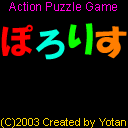
<style>
.page{position:relative;width:128px;height:128px;background:#000000}
.page>*{position:absolute;margin:0}
.t1{font:12px "ArialMT";color:#ff00de}
.t2{font:36px "HGSoeiKakugothicUB";color:#ff0000}
.t3{font:36px "HGSoeiKakugothicUB";color:#00ffde}
.t4{font:36px "HGSoeiKakupoptai";color:#0cff00}
.t5{font:36px "HGSoeiKakupoptai";color:#ff7e00}
.t6{font:11px "ArialMT";color:#ffd800}
</style>
<div class="page">
<p class="t1" style="left:9px;top:2px;width:108px;height:9px">Action Puzzle Game</p>
<p class="t2" style="left:1px;top:24px;width:32px;height:32px">ぽ</p>
<p class="t3" style="left:35px;top:29px;width:30px;height:31px">ろ</p>
<p class="t4" style="left:68px;top:23px;width:25px;height:32px">り</p>
<p class="t5" style="left:95px;top:26px;width:32px;height:33px">す</p>
<p class="t6" style="left:1px;top:118px;width:125px;height:10px">(C)2003 Created by Yotan</p>
</div>
